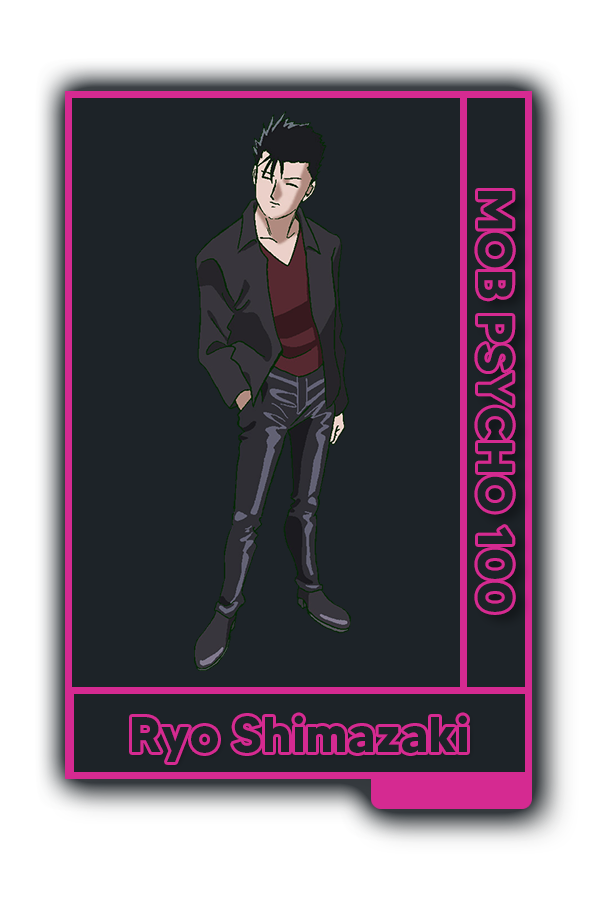
<style>
.page{position:relative;width:600px;height:900px;background:#1d2328}
.page>*{position:absolute;margin:0}
.t1{font:48.8px "MADETOMMY-Bold";color:#1d2328}
.t2{font:49.7px "MADETOMMY-Bold";color:#1d2328}
</style>
<div class="page">
<p class="t1" style="left:477px;top:191px;width:36px;height:421px;rotate:90deg">MOB PSYCHO 100</p>
<p class="t2" style="left:132px;top:715px;width:335px;height:47px">Ryo Shimazaki</p>
</div>
